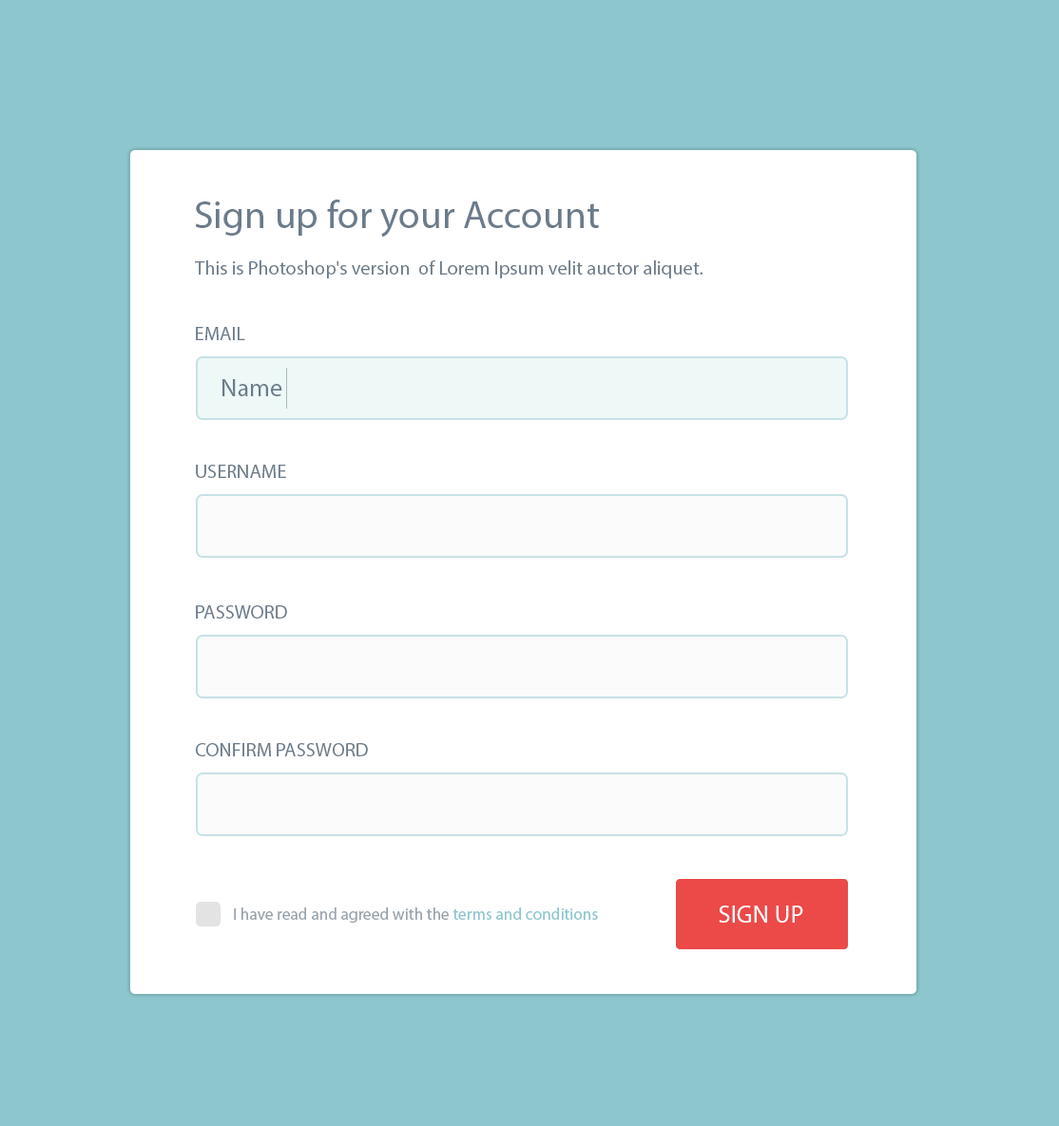
<style>
.page{position:relative;width:1059px;height:1126px;background:#8dc6cd}
.page>*{position:absolute;margin:0}
.t1{font:39.3px "MyriadPro-Regular";color:#6b7b8a}
.t2{font:19.3px "MyriadPro-Regular";color:#6b7b8a}
.t3{font:25px "MyriadPro-Regular";color:#6b7b8a}
.t4{font:25px "MyriadPro-Regular";color:#ffffff}
.t5{font:16.5px "MyriadPro-Regular";color:#98a3ad}
.t6{font:16.5px "MyriadPro-Regular";color:#8dc6cd}
</style>
<div class="page">
<p class="t1" style="left:195px;top:200px;width:404px;height:38px">Sign up for your Account</p>
<p class="t2" style="left:195px;top:260px;width:507px;height:18px">This is Photoshop's version  of Lorem Ipsum velit auctor aliquet.</p>
<p class="t2" style="left:196px;top:327px;width:49px;height:13px">EMAIL</p>
<p class="t3" style="left:222px;top:379px;width:60px;height:17px">Name</p>
<p class="t2" style="left:196px;top:465px;width:90px;height:13px">USERNAME</p>
<p class="t2" style="left:196px;top:605px;width:91px;height:14px">PASSWORD</p>
<p class="t2" style="left:196px;top:743px;width:172px;height:14px">CONFIRM PASSWORD</p>
<p class="t4" style="left:719px;top:906px;width:84px;height:17px">SIGN UP</p>
<p class="t5" style="left:234px;top:908px;width:364px;height:15px">I have read and agreed with the <span class="t6">terms and conditions</span></p>
</div>
